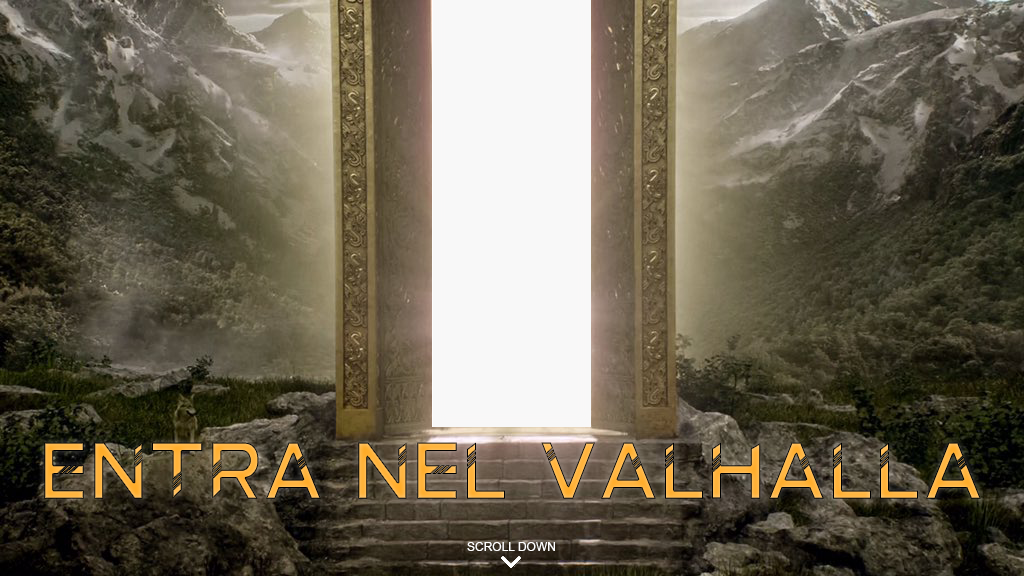
<style>
.page{position:relative;width:1024px;height:576px}
.page>*{position:absolute;margin:0}
.t1{font:72px "VikingsFont"}
.t2{font:12px "ArialMT";color:#ffffff}
</style>
<div class="page">
<p class="t1" style="left:44px;top:442px;width:937px;height:57px">Entra nel Valhalla</p>
<p class="t2" style="left:467px;top:542px;width:88px;height:9px">SCROLL DOWN</p>
</div>
